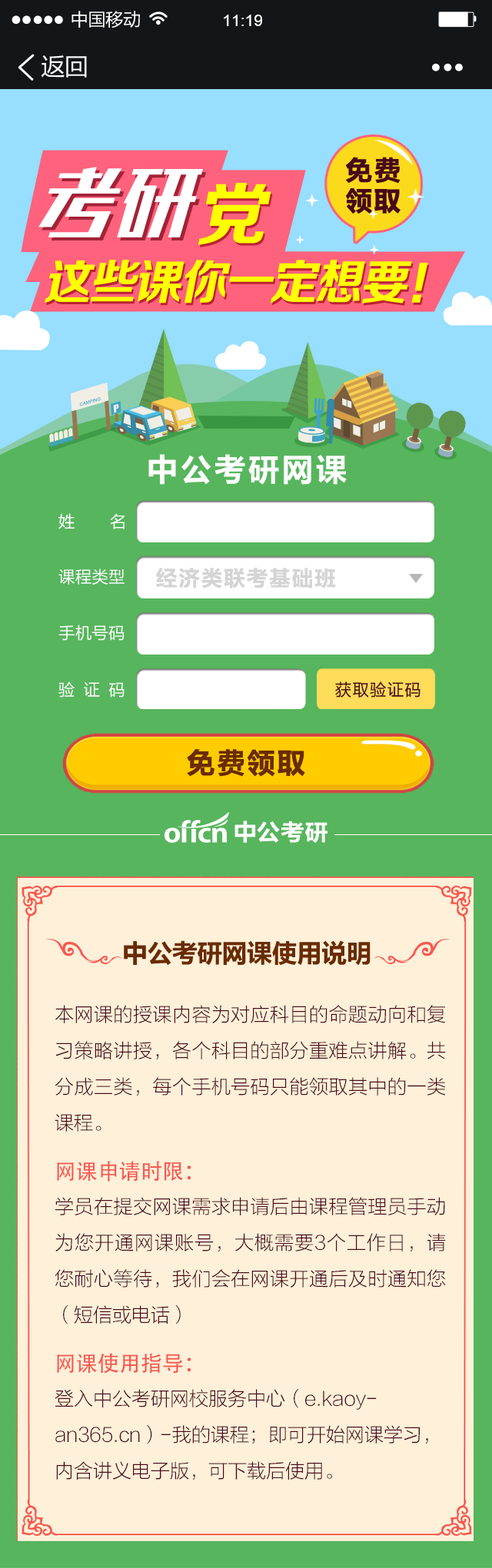
<style>
.page{position:relative;width:492px;height:1568px;background:#fff0d9}
.page>*{position:absolute;margin:0}
.t1{font:17.5px "MicrosoftYaHei";color:#ffffff}
.t2{font:16.5px "ArialMT";color:#ffffff}
.t3{font:23.6px "MicrosoftYaHei";color:#ffffff}
.t4{font:27.7px/30.6px "FZLTCHJW--GB1-0";color:#480817;font-weight:bold}
.t5{font:79.3px "FZSKJW--GB1-0";color:#ffffff}
.t6{font:79.3px "FZSKJW--GB1-0"}
.t7{font:69.9px "FZZCHJW--GB1-0";letter-spacing:-0.05em;color:#ffff00}
.t8{font:48.5px "FZZCHJW--GB1-0";letter-spacing:-0.05em;color:#ffff00}
.t9{font:30.7px "MicrosoftYaHei-Bold";letter-spacing:0.1em;color:#ffffff}
.t10{font:16.2px "MicrosoftYaHei";letter-spacing:0.06em;color:#ffffff}
.t11{font:16.2px "MicrosoftYaHei";letter-spacing:0.03em;color:#ffffff}
.t12{font:22px "FZLTCHJW--GB1-0";letter-spacing:0.03em;color:#d4d4d4}
.t13{font:16.2px "MicrosoftYaHei";letter-spacing:0.13em;color:#ffffff}
.t14{font:16.2px "MicrosoftYaHei";letter-spacing:0.075em;color:#480817}
.t15{font:29.3px "FZLTCHJW--GB1-0";letter-spacing:0.03em;color:#692b01}
.t16{font:26.3px "FZLTCHJW--GB1-0";letter-spacing:-0.05em;color:#692b01}
.t17{font:19.2px/36.1px "FZLTXHK--GBK1-0";color:#480817}
.t18{font:19.2px/36.1px "FZLTXHK--GBK1-0";letter-spacing:-0.005em;color:#480817}
.t19{font:21.5px/36.1px "AdobeHeitiStd-Regular";color:#f85951}
</style>
<div class="page">
<p class="t1" style="left:71px;top:11px;width:69px;height:17px">中国移动</p>
<p class="t2" style="left:224px;top:15px;width:38px;height:11px">11:19</p>
<p class="t3" style="left:41px;top:55px;width:46px;height:23px">返回</p>
<p class="t4" style="left:345px;top:157px;width:55px;height:57px;text-align:center">免费<br>领取</p>
<p class="t5" style="left:38px;top:167px;width:165px;height:70px">考研</p>
<p class="t6" style="left:41px;top:170px;width:165px;height:70px">考研</p>
<p class="t7" style="left:198px;top:183px;width:73px;height:62px">党</p>
<p class="t8" style="left:45px;top:260px;width:383px;height:43px">这些课你一定想要！</p>
<p class="t9" style="left:148px;top:454px;width:198px;height:31px">中公考研网课</p>
<p class="t10" style="left:58px;top:513px;width:66px;height:16px">姓      名</p>
<p class="t11" style="left:58px;top:569px;width:66px;height:16px">课程类型</p>
<p class="t12" style="left:156px;top:568px;width:180px;height:20px">经济类联考基础班</p>
<p class="t11" style="left:58px;top:625px;width:66px;height:16px">手机号码</p>
<p class="t13" style="left:58px;top:681px;width:66px;height:17px">验 证 码</p>
<p class="t14" style="left:335px;top:681px;width:85px;height:17px">获取验证码</p>
<p class="t15" style="left:187px;top:749px;width:118px;height:28px">免费领取</p>
<p class="t16" style="left:124px;top:940px;width:246px;height:26px">中公考研网课使用说明</p>
<p class="t17" style="left:55px;top:1005px;width:391px;height:475px;text-align:justify"><span class="t18">本网课的授课内容为对应科目的命题动向和复习策略讲授，各个科目的部分重难点讲解。共分成三类，每个手机号码只能领取其中的一类课程。<br></span><span class="t19">网课申请时限：<br></span>学员在提交网课需求申请后由课程管理员手动为您开通网课账号，大概需要3个工作日，请您耐心等待，我们会在网课开通后及时通知您（短信或电话）<br><span class="t19">网课使用指导：<br></span>登入中公考研网校服务中心（e.kaoyan365.cn）-我的课程；即可开始网课学习，内含讲义电子版，可下载后使用。</p>
</div>
